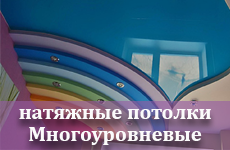
<style>
.page{position:relative;width:230px;height:150px}
.page>*{position:absolute;margin:0}
.t1{font:20.8px "Cambria-Bold";color:#fbfbfb}
</style>
<div class="page">
<p class="t1" style="left:19px;top:109px;width:192px;height:10px">натяжные потолки</p>
<p class="t1" style="left:29px;top:127px;width:173px;height:18px">Многоуровневые</p>
</div>
